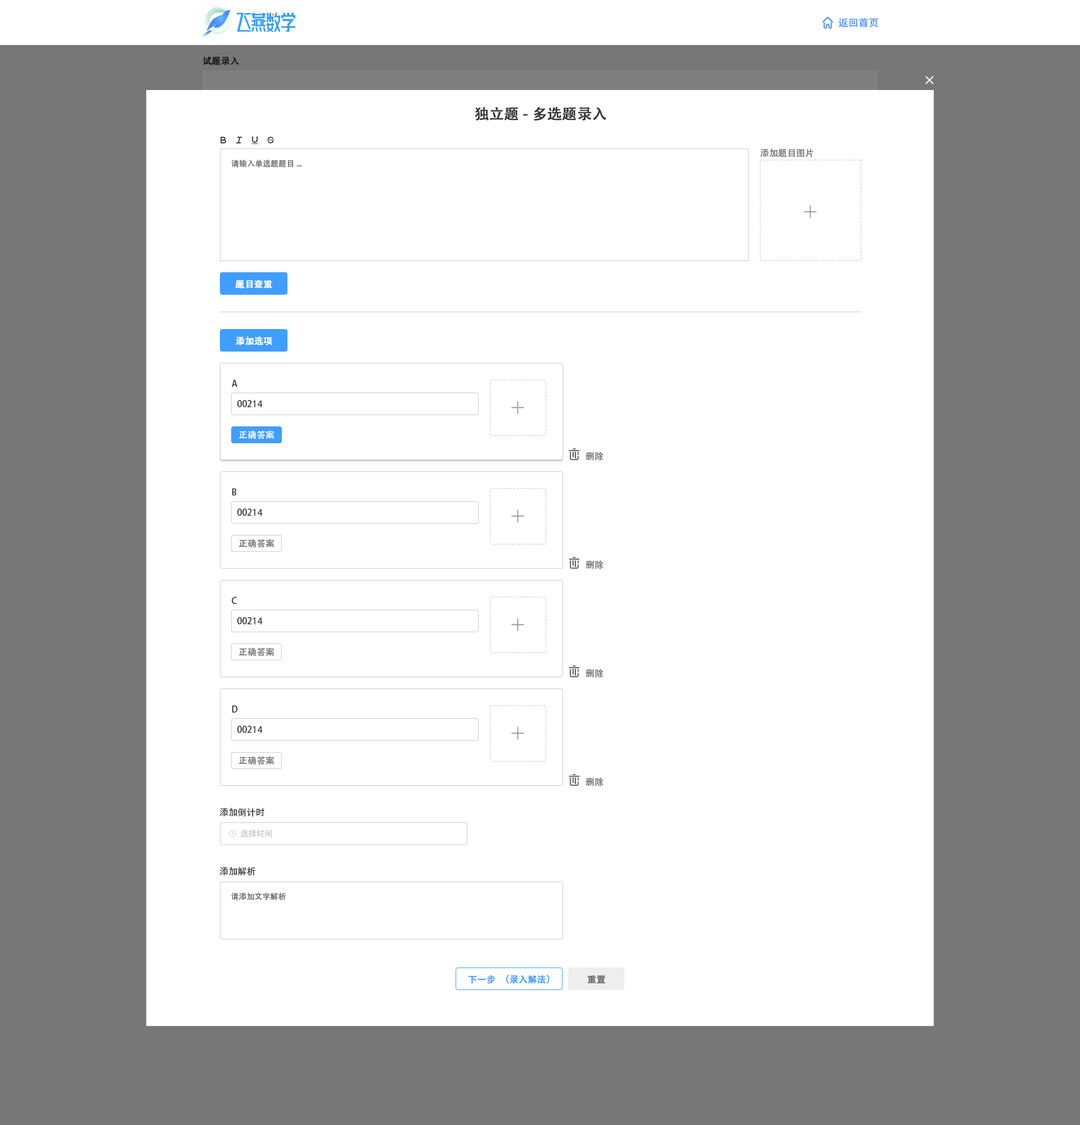
<style>
.page{position:relative;width:1080px;height:1125px;background:#ffffff}
.page>*{position:absolute;margin:0}
.t1{font:10.1px "AdobeHeitiStd-Regular";color:#408eff}
.t2{font:9px "AdobeHeitiStd-Regular";color:#191919;font-weight:bold}
.t3{font:14.6px "AdobeHeitiStd-Regular";color:#333333;font-weight:bold}
.t4{font:9px "AdobeHeitiStd-Regular";color:#666666}
.t5{font:7.9px "AdobeHeitiStd-Regular";color:#666666}
.t6{font:9px "AdobeHeitiStd-Regular";color:#ffffff;font-weight:bold}
.t7{font:9px "AdobeHeitiStd-Regular";color:#333333}
.t8{font:9px "AdobeHeitiStd-Regular";color:#ffffff}
.t9{font:9px "AdobeHeitiStd-Regular";color:#409eff;font-weight:bold}
.t10{font:9px "AdobeHeitiStd-Regular";color:#666666;font-weight:bold}
</style>
<div class="page">
<p class="t1" style="left:838px;top:17px;width:41px;height:11px">返回首页</p>
<p class="t2" style="left:202px;top:56px;width:37px;height:9px">试题录入</p>
<p class="t3" style="left:475px;top:107px;width:131px;height:14px">独立题-多选题录入</p>
<p class="t4" style="left:760px;top:148px;width:53px;height:10px">添加题目图片</p>
<p class="t5" style="left:231px;top:159px;width:71px;height:9px">请输入单选题题目...</p>
<p class="t6" style="left:235px;top:280px;width:37px;height:9px">题目查重</p>
<p class="t6" style="left:236px;top:336px;width:36px;height:9px">添加选项</p>
<p class="t7" style="left:232px;top:380px;width:5px;height:7px">A</p>
<p class="t7" style="left:237px;top:400px;width:26px;height:7px">00214</p>
<p class="t8" style="left:239px;top:430px;width:35px;height:9px">正确答案</p>
<p class="t4" style="left:586px;top:452px;width:18px;height:9px">删除</p>
<p class="t7" style="left:232px;top:488px;width:5px;height:8px">B</p>
<p class="t7" style="left:237px;top:508px;width:26px;height:8px">00214</p>
<p class="t4" style="left:239px;top:539px;width:35px;height:9px">正确答案</p>
<p class="t4" style="left:586px;top:560px;width:18px;height:9px">删除</p>
<p class="t7" style="left:232px;top:597px;width:5px;height:7px">C</p>
<p class="t7" style="left:237px;top:617px;width:26px;height:7px">00214</p>
<p class="t4" style="left:239px;top:647px;width:35px;height:9px">正确答案</p>
<p class="t4" style="left:586px;top:669px;width:18px;height:9px">删除</p>
<p class="t7" style="left:232px;top:705px;width:6px;height:8px">D</p>
<p class="t7" style="left:237px;top:726px;width:26px;height:7px">00214</p>
<p class="t4" style="left:239px;top:756px;width:35px;height:9px">正确答案</p>
<p class="t4" style="left:586px;top:777px;width:18px;height:9px">删除</p>
<p class="t7" style="left:220px;top:808px;width:44px;height:9px">添加倒计时</p>
<p class="t7" style="left:220px;top:867px;width:35px;height:9px">添加解析</p>
<p class="t5" style="left:231px;top:893px;width:55px;height:8px">请添加文字解析</p>
<p class="t9" style="left:468px;top:975px;width:82px;height:9px">下一步（录入解法）</p>
<p class="t10" style="left:587px;top:975px;width:18px;height:9px">重置</p>
</div>
